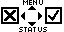
<style>
.page{position:relative;width:64px;height:32px;background:#ffffff}
.page>*{position:absolute;margin:0}
.t1{font:8px "04b03";color:#000000;scale:1.06 1}
</style>
<div class="page">
<p class="t1" style="left:23px;top:0px;width:20px;height:5px">MENU</p>
<p class="t1" style="left:19px;top:27px;width:28px;height:5px">STATUS</p>
</div>
